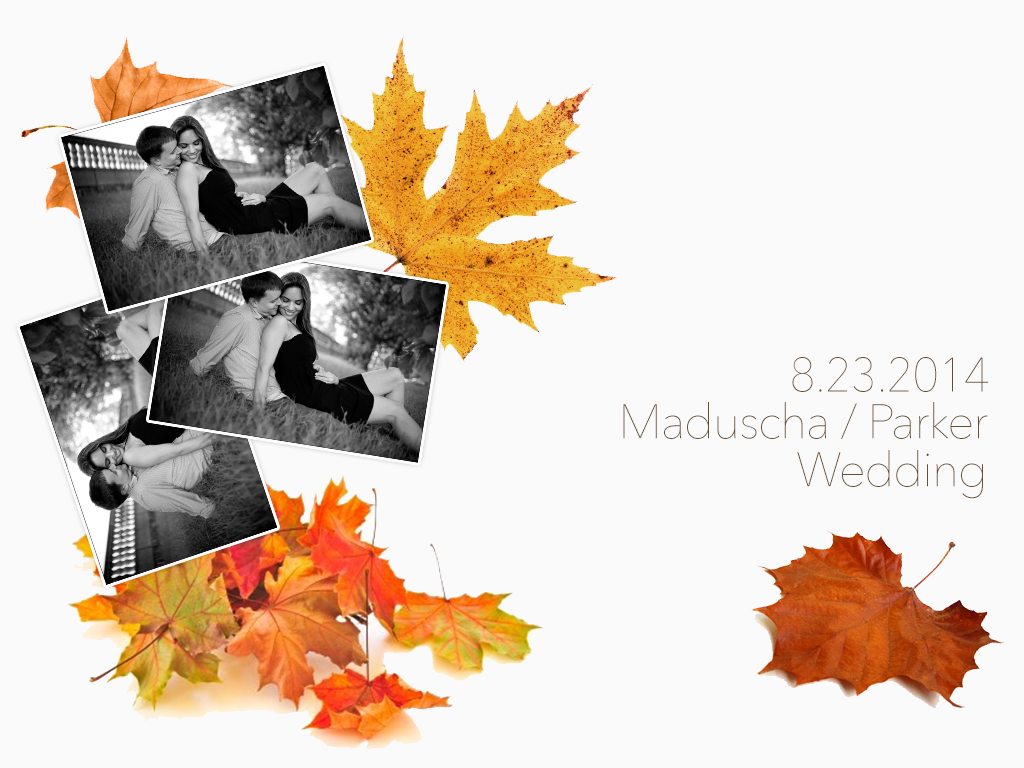
<style>
.page{position:relative;width:1024px;height:768px;background:#fbfafa}
.page>*{position:absolute;margin:0}
.t1{font:48px "AvenirNext-UltraLight";letter-spacing:-0.025em;color:#644f31}
.t2{font:48px/48px "AvenirNext-UltraLight";letter-spacing:-0.025em;color:#644f31}
</style>
<div class="page">
<p class="t1" style="left:792px;top:357px;width:197px;height:35px">8.23.2014</p>
<p class="t2" style="left:623px;top:402px;width:365px;height:97px;text-align:right">Maduscha / Parker<br>Wedding</p>
</div>
